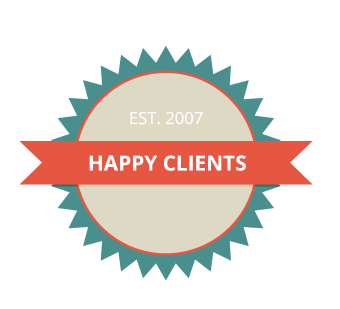
<style>
.page{position:relative;width:340px;height:309px;background:#ffffff}
.page>*{position:absolute;margin:0}
.t1{font:16.7px "OpenSans";color:#ffffff;text-transform:uppercase}
.t2{font:20.8px "OpenSans-Bold";color:#ffffff;text-transform:uppercase}
</style>
<div class="page">
<p class="t1" style="left:130px;top:111px;width:73px;height:14px">est. 2007</p>
<p class="t2" style="left:89px;top:155px;width:157px;height:16px">HAPPY CLIENTS</p>
</div>
